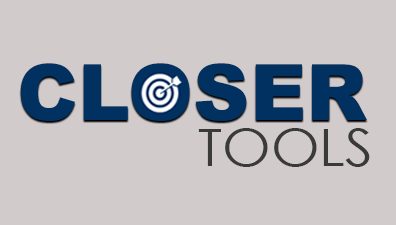
<style>
.page{position:relative;width:396px;height:225px;background:#d2cbcb}
.page>*{position:absolute;margin:0}
.t1{font:78.1px "Arial-Black";color:#013161}
.t2{font:50.6px "CenturyGothic";color:#3a3a3a;scale:1.1 1}
</style>
<div class="page">
<p class="t1" style="left:20px;top:63px;width:347px;height:58px">CLOSER</p>
<p class="t2" style="left:198px;top:128px;width:172px;height:39px">TOOLS</p>
</div>
